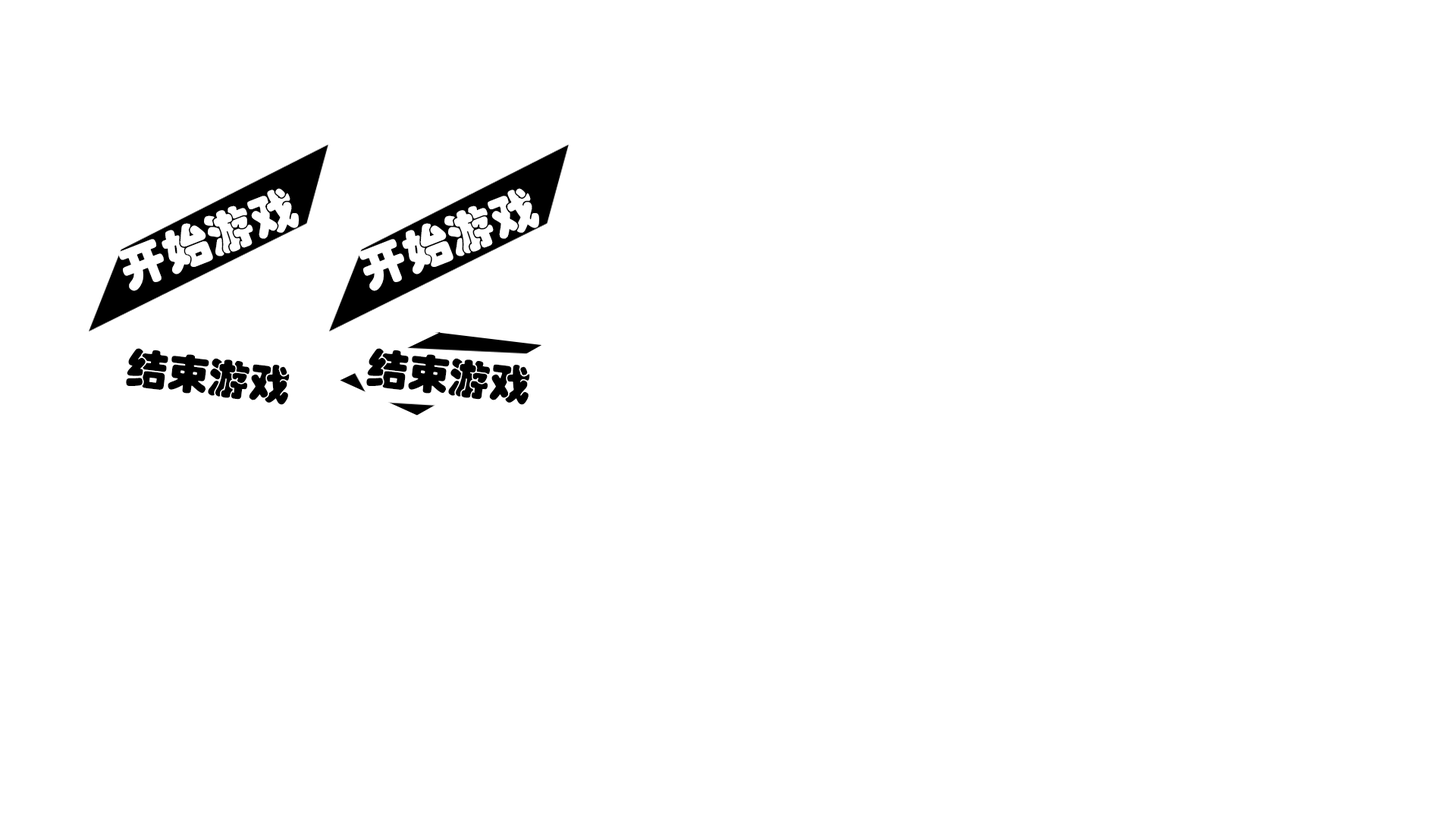
<style>
.page{position:relative;width:1456px;height:819px;background:#ffffff}
.page>*{position:absolute;margin:0}
.t1{font:46.7px "STHupo";color:#ffffff}
.t2{font:41.2px "STHupo";color:#000000}
</style>
<div class="page">
<p class="t1" style="left:118px;top:188px;width:181px;height:103px;rotate:-21deg">开始游戏</p>
<p class="t1" style="left:359px;top:188px;width:180px;height:103px;rotate:-21deg">开始游戏</p>
<p class="t2" style="left:126px;top:348px;width:164px;height:57px;rotate:7deg">结束游戏</p>
<p class="t2" style="left:366px;top:348px;width:164px;height:57px;rotate:7deg">结束游戏</p>
</div>
